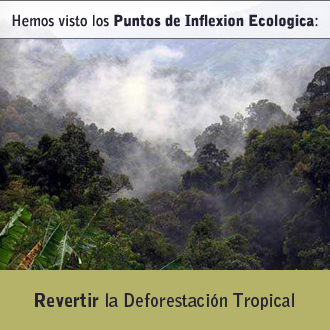
<style>
.page{position:relative;width:330px;height:330px}
.page>*{position:absolute;margin:0}
.t1{font:15px "BellGothicStd-Black";color:#252232}
.t2{font:15px "BellGothicStd-Bold";color:#252232}
.t3{font:18px "BellGothicStd-Bold";color:#252232}
.t4{font:18px "BellGothicStd-Black";color:#252232}
</style>
<div class="page">
<p class="t1" style="left:12px;top:14px;width:306px;height:15px"><span class="t2">Hemos visto los </span>Puntos de Inflexion Ecologica<span class="t2">:</span></p>
<p class="t3" style="left:35px;top:293px;width:259px;height:17px"><span class="t4">Revertir </span>la Deforestación Tropical</p>
</div>
